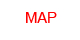
<style>
.page{position:relative;width:80px;height:40px;background:#ffffff}
.page>*{position:absolute;margin:0}
.t1{font:14.7px "ArialMT";color:#ff0000}
</style>
<div class="page">
<p class="t1" style="left:26px;top:12px;width:31px;height:11px">MAP</p>
</div>
